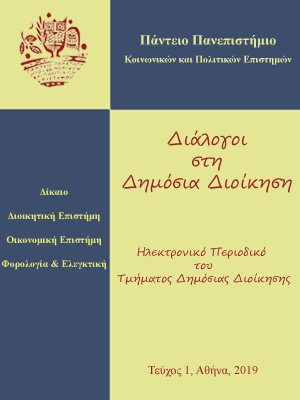
<style>
.page{position:relative;width:300px;height:400px;background:#e5e694}
.page>*{position:absolute;margin:0}
.t1{font:10px/18px "TimesNewRomanPS-BoldMT";color:#e5e694}
.t2{font:14px/18px "TimesNewRomanPS-BoldMT";color:#e5e694}
.t3{font:18px "SegoeScript";color:#992222}
.t4{font:10px "TimesNewRomanPS-BoldMT";color:#e6e76e}
.t5{font:11px "SegoeScript";color:#992222}
.t6{font:12px "TimesNewRomanPSMT";color:#992222}
</style>
<div class="page">
<p class="t1" style="left:124px;top:35px;width:168px;height:30px;text-align:center"><span class="t2">Πάντειο Πανεπιστήμιο<br></span>Κοινωνικών και Πολιτικών Επιστημών</p>
<p class="t3" style="left:122px;top:130px;width:170px;height:63px;text-align:center">Διάλογοι<br>στη<br>Δημόσια Διοίκηση</p>
<p class="t4" style="left:1px;top:188px;width:106px;height:82px;text-align:center">Δίκαιο<br><br>Διοικητική Επιστήμη<br><br>Οικονομική Επιστήμη<br><br>Φορολογία &amp; Ελεγκτική</p>
<p class="t5" style="left:117px;top:247px;width:174px;height:38px;text-align:center">Ηλεκτρονικό Περιοδικό <br>του<br>Τμήματος Δημόσιας Διοίκησης</p>
<p class="t6" style="left:148px;top:365px;width:110px;height:12px">Τεύχος 1, Αθήνα, 2019</p>
</div>
